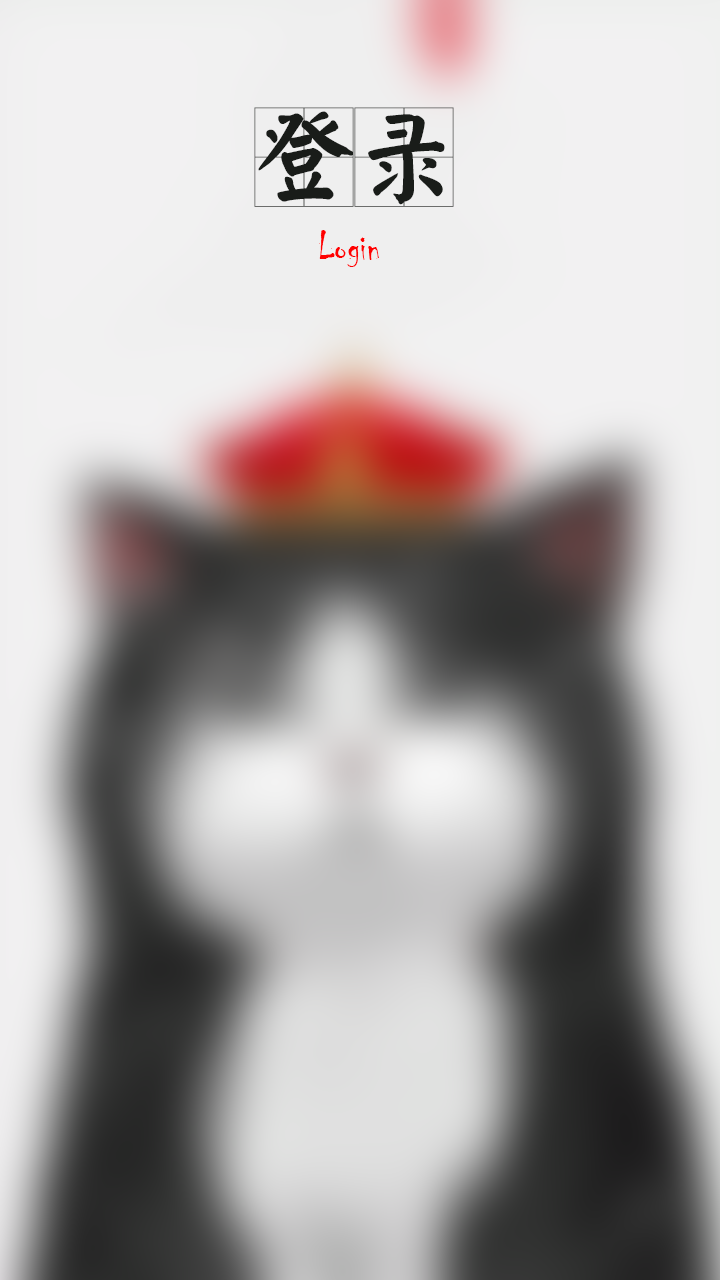
<style>
.page{position:relative;width:720px;height:1280px}
.page>*{position:absolute;margin:0}
.t1{font:100px "YankaigungEG-Ultra-GB";color:#191c19}
.t2{font:40px "Chiller-Regular";color:#ff0000}
</style>
<div class="page">
<p class="t1" style="left:254px;top:107px;width:200px;height:100px">登录</p>
<p class="t2" style="left:319px;top:230px;width:60px;height:37px">Login</p>
</div>
